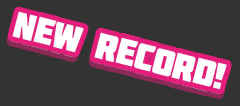
<style>
.page{position:relative;width:240px;height:106px;background:#333333}
.page>*{position:absolute;margin:0}
.t1{font:36.5px "Molot";letter-spacing:-0.02em;color:#ffffff}
</style>
<div class="page">
<p class="t1" style="left:11px;top:16px;width:215px;height:79px;rotate:14deg;opacity:0.5">New Record!</p>
<p class="t1" style="left:12px;top:11px;width:215px;height:79px;rotate:14deg">New Record!</p>
</div>
